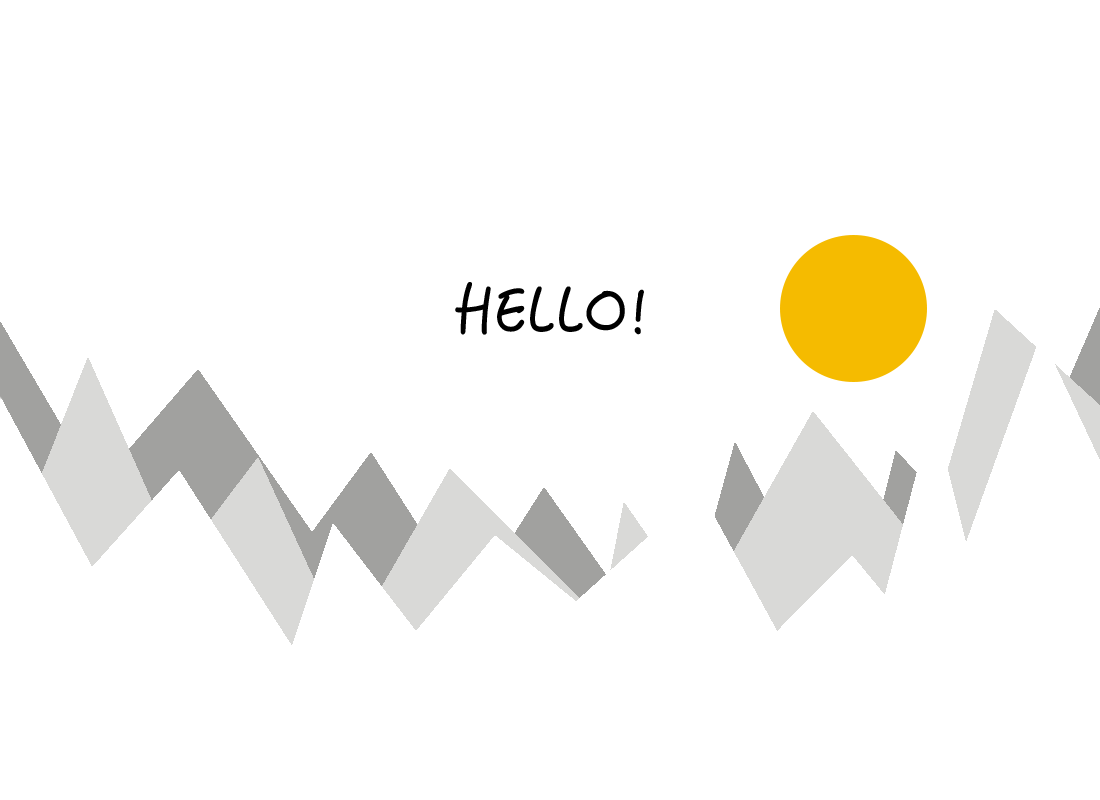
<style>
.page{position:relative;width:1100px;height:800px;background:#ffffff}
.page>*{position:absolute;margin:0}
.t1{font:60px "HanziPenTC-W5";color:#000000}
</style>
<div class="page">
<p class="t1" style="left:455px;top:282px;width:189px;height:53px">HELLO!</p>
</div>
